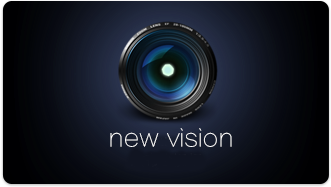
<style>
.page{position:relative;width:331px;height:187px}
.page>*{position:absolute;margin:0}
.t1{font:24px "FZLTCXHJW--GB1-0";color:#ffffff}
</style>
<div class="page">
<p class="t1" style="left:110px;top:132px;width:49px;height:15px">new</p>
<p class="t1" style="left:167px;top:128px;width:65px;height:19px">vision</p>
</div>
